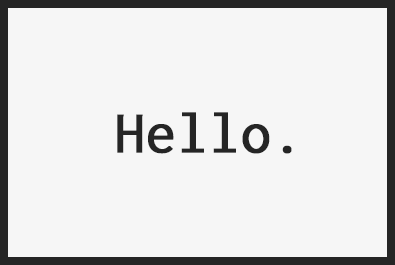
<style>
.page{position:relative;width:395px;height:265px;background:#f6f6f6}
.page>*{position:absolute;margin:0}
.t1{font:60px "Inconsolata";color:#252525;font-weight:bold}
</style>
<div class="page">
<p class="t1" style="left:117px;top:112px;width:175px;height:42px">Hello.</p>
</div>
